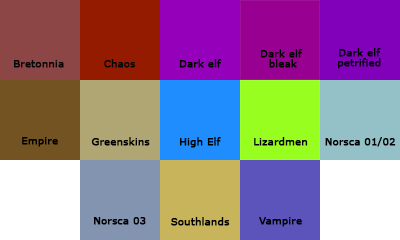
<style>
.page{position:relative;width:400px;height:240px}
.page>*{position:absolute;margin:0}
.t1{font:10px/10px "Verdana";color:#000000;font-weight:bold}
.t2{font:10px "Verdana";color:#070707;font-weight:bold}
.t3{font:10px "Verdana";color:#000000;font-weight:bold}
</style>
<div class="page">
<p class="t1" style="left:260px;top:49px;width:43px;height:19px;text-align:center">Dark elf <br>bleak</p>
<p class="t1" style="left:338px;top:48px;width:43px;height:21px;text-align:center">Dark elf<br>petrified</p>
<p class="t2" style="left:14px;top:60px;width:50px;height:8px">Bretonnia</p>
<p class="t2" style="left:104px;top:59px;width:32px;height:9px">Chaos</p>
<p class="t3" style="left:179px;top:59px;width:43px;height:9px">Dark elf</p>
<p class="t3" style="left:22px;top:137px;width:36px;height:10px">Empire</p>
<p class="t3" style="left:91px;top:137px;width:59px;height:9px">Greenskins</p>
<p class="t3" style="left:180px;top:137px;width:41px;height:11px">High Elf</p>
<p class="t3" style="left:254px;top:137px;width:54px;height:9px">Lizardmen</p>
<p class="t3" style="left:325px;top:137px;width:71px;height:10px">Norsca 01/02</p>
<p class="t3" style="left:94px;top:217px;width:52px;height:8px">Norsca 03</p>
<p class="t3" style="left:171px;top:217px;width:59px;height:9px">Southlands</p>
<p class="t3" style="left:259px;top:217px;width:43px;height:10px">Vampire</p>
</div>
